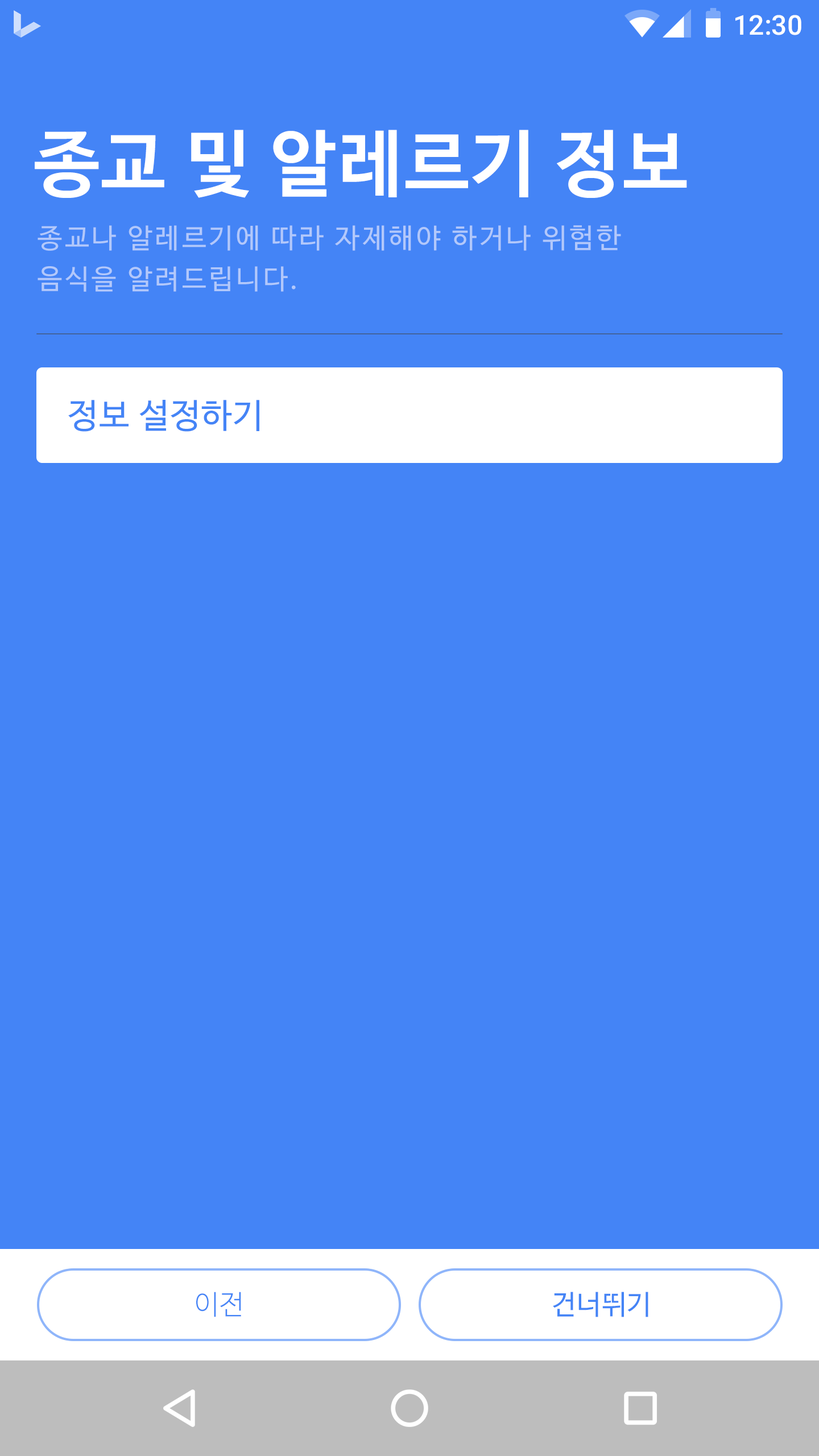
<style>
.page{position:relative;width:819px;height:1456px;background:#4484f6}
.page>*{position:absolute;margin:0}
.t1{font:27.3px "Roboto-Medium";color:#ffffff}
.t2{font:72.8px "NanumBarunGothicBold";letter-spacing:0.025em;color:#ffffff}
.t3{font:27.3px/40.9px "NanumBarunGothic";letter-spacing:0.1em;color:#b2c8fb}
.t4{font:34.1px "NanumBarunGothic";letter-spacing:0.025em;color:#4484f6}
.t5{font:27.3px "NanumBarunGothicLight";letter-spacing:0.025em;color:#4484f6}
.t6{font:27.3px "NanumBarunGothic";letter-spacing:0.025em;color:#4484f6}
</style>
<div class="page">
<p class="t1" style="left:735px;top:15px;width:66px;height:20px">12:30</p>
<p class="t2" style="left:35px;top:130px;width:652px;height:68px">종교 및 알레르기 정보</p>
<p class="t3" style="left:38px;top:225px;width:583px;height:67px">종교나 알레르기에 따라 자제해야 하거나 위험한<br>음식을 알려드립니다.</p>
<p class="t4" style="left:68px;top:400px;width:191px;height:32px">정보 설정하기</p>
<p class="t5" style="left:196px;top:1292px;width:45px;height:25px">이전</p>
<p class="t6" style="left:553px;top:1292px;width:95px;height:25px">건너뛰기</p>
</div>
